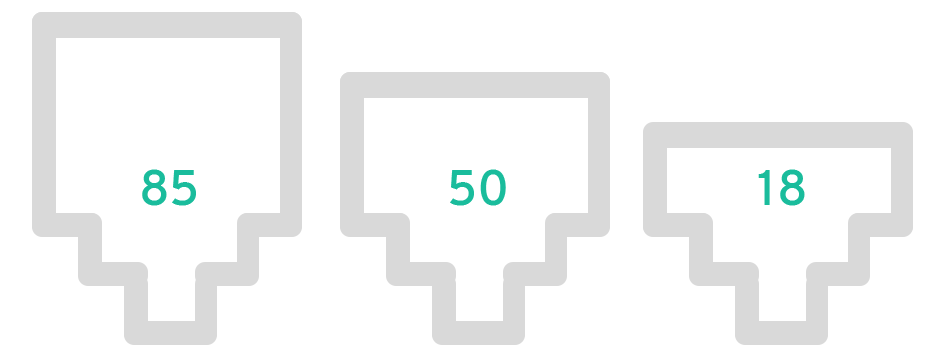
<style>
.page{position:relative;width:945px;height:357px;background:#ffffff}
.page>*{position:absolute;margin:0}
.t1{font:50px "Overpass-SemiBold";color:#1abc9c}
</style>
<div class="page">
<p class="t1" style="left:142px;top:169px;width:54px;height:37px">85</p>
<p class="t1" style="left:450px;top:169px;width:56px;height:37px">50</p>
<p class="t1" style="left:758px;top:169px;width:47px;height:37px">18</p>
</div>
